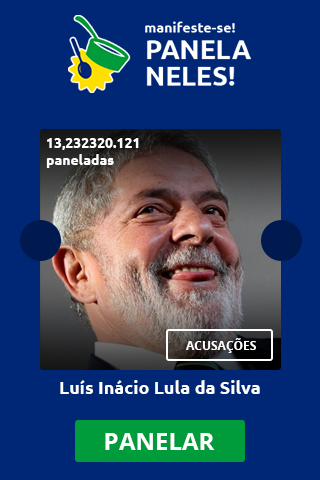
<style>
.page{position:relative;width:320px;height:480px;background:#002776}
.page>*{position:absolute;margin:0}
.t1{font:14px "Ubuntu-Bold";color:#ffffff}
.t2{font:12px "OpenSans-Bold";color:#ffffff}
.t3{font:18px "Ubuntu-Bold";color:#ffffff}
.t4{font:24px "OpenSans-Bold";color:#ffffff}
</style>
<div class="page">
<p class="t1" style="left:46px;top:138px;width:93px;height:30px">13,232320.121<br>paneladas</p>
<p class="t2" style="left:186px;top:338px;width:70px;height:15px">ACUSAÇÕES</p>
<p class="t3" style="left:60px;top:380px;width:200px;height:14px">Luís Inácio Lula da Silva</p>
<p class="t4" style="left:105px;top:433px;width:110px;height:17px">PANELAR</p>
</div>
